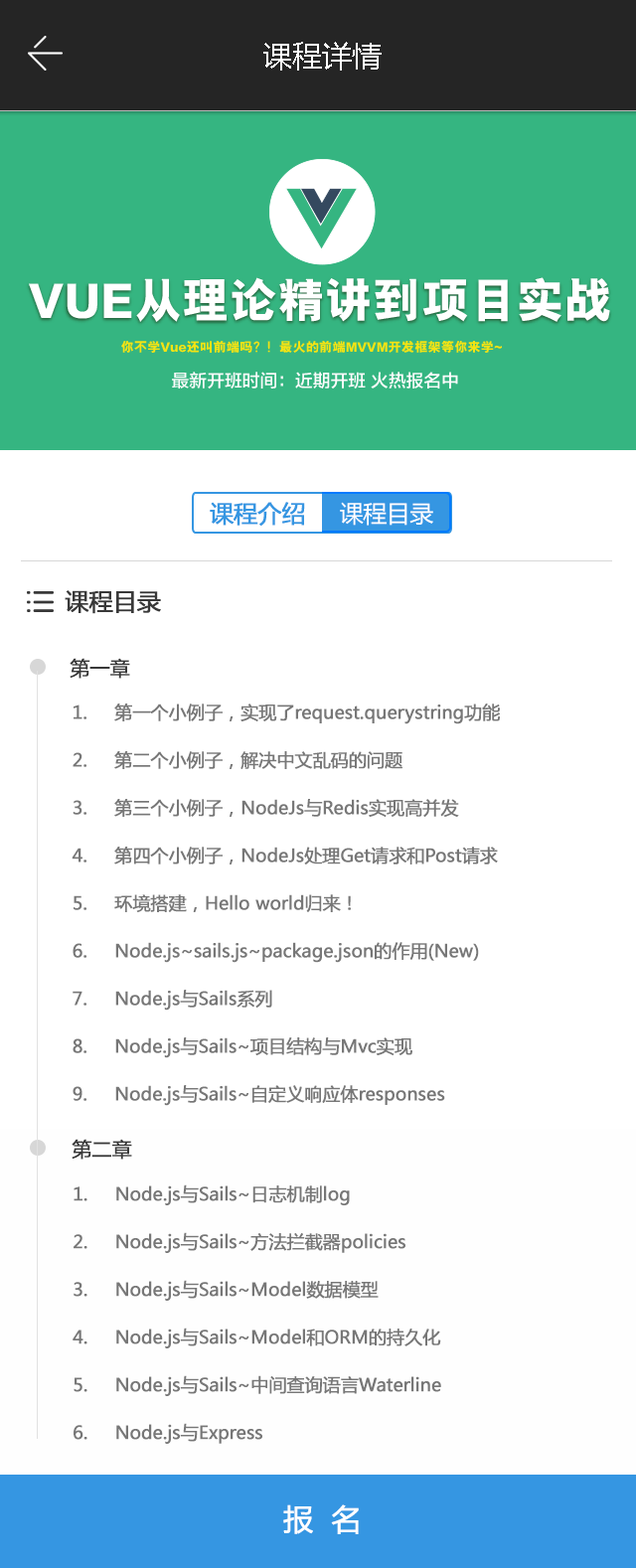
<style>
.page{position:relative;width:636px;height:1568px;background:#ffffff}
.page>*{position:absolute;margin:0}
.t1{font:29.8px "MicrosoftYaHei";color:#ffffff}
.t2{font:23.8px "MicrosoftYaHei";letter-spacing:-0.02em;color:#3596e2;font-weight:bold}
.t3{font:23.8px "MicrosoftYaHei";letter-spacing:-0.02em;color:#ffffff}
.t4{font:23.8px "MicrosoftYaHei";letter-spacing:-0.02em;color:#383838;font-weight:bold}
.t5{font:19.9px "MicrosoftYaHei";letter-spacing:-0.02em;color:#383838;font-weight:bold}
.t6{font:17.9px/47.7px "MicrosoftYaHei";letter-spacing:-0.02em;color:#777777;font-weight:bold}
.t7{font:29.4px "MicrosoftYaHei";letter-spacing:-0.02em;color:#ffffff;font-weight:bold}
</style>
<div class="page">
<p class="t1" style="left:263px;top:42px;width:119px;height:29px">课程详情</p>
<p class="t2" style="left:210px;top:502px;width:95px;height:24px">课程介绍</p>
<p class="t3" style="left:340px;top:502px;width:93px;height:24px">课程目录</p>
<p class="t4" style="left:65px;top:590px;width:96px;height:24px">课程目录</p>
<p class="t5" style="left:70px;top:658px;width:60px;height:21px">第一章</p>
<p class="t6" style="left:72px;top:704px;width:428px;height:402px">1.     第一个小例子，实现了request.querystring功能<br>2.     第二个小例子，解决中文乱码的问题<br>3.     第三个小例子，NodeJs与Redis实现高并发<br>4.     第四个小例子，NodeJs处理Get请求和Post请求<br>5.     环境搭建，Hello world归来！<br>6.     Node.js~sails.js~package.json的作用(New)<br>7.     Node.js与Sails系列<br>8.     Node.js与Sails~项目结构与Mvc实现<br>9.     Node.js与Sails~自定义响应体responses</p>
<p class="t5" style="left:72px;top:1139px;width:60px;height:21px">第二章</p>
<p class="t6" style="left:73px;top:1184px;width:368px;height:260px">1.     Node.js与Sails~日志机制log<br>2.     Node.js与Sails~方法拦截器policies<br>3.     Node.js与Sails~Model数据模型<br>4.     Node.js与Sails~Model和ORM的持久化<br>5.     Node.js与Sails~中间查询语言Waterline<br>6.     Node.js与Express</p>
<p class="t7" style="left:283px;top:1504px;width:76px;height:30px">报  名</p>
</div>
